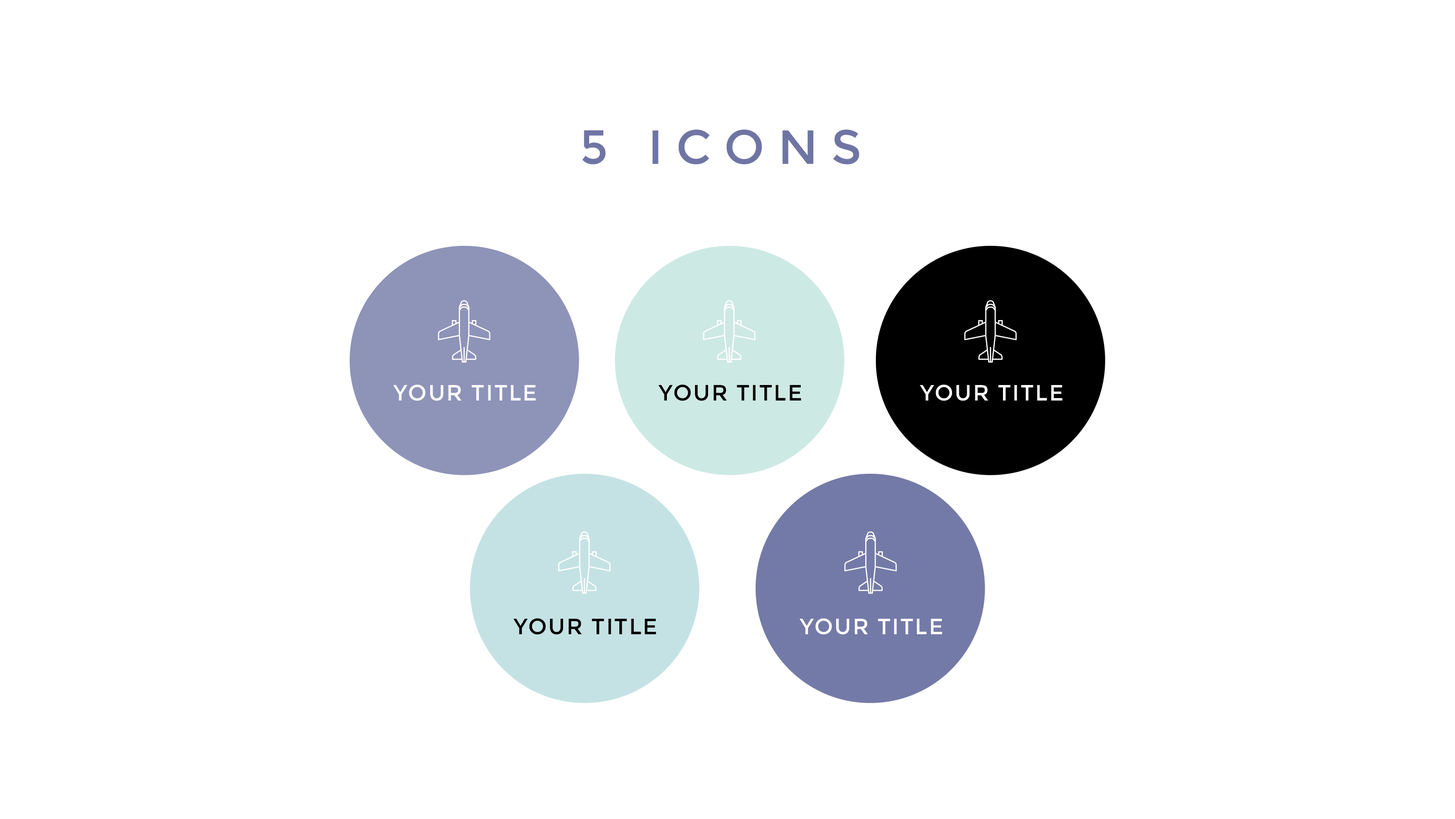
<style>
.page{position:relative;width:1455px;height:819px;background:#ffffff}
.page>*{position:absolute;margin:0}
.t1{font:47.9px "Montserrat-Regular";letter-spacing:0.28em;color:#6f75a3}
.t2{font:22.2px "Montserrat-Regular";letter-spacing:0.056em;color:#ffffff}
.t3{font:22.2px "Montserrat-Regular";letter-spacing:0.056em;color:#000000}
</style>
<div class="page">
<p class="t1" style="left:583px;top:130px;width:277px;height:34px">5 ICONS</p>
<p class="t2" style="left:393px;top:385px;width:143px;height:16px">YOUR TITLE</p>
<p class="t3" style="left:658px;top:385px;width:143px;height:16px">YOUR TITLE</p>
<p class="t2" style="left:920px;top:385px;width:143px;height:16px">YOUR TITLE</p>
<p class="t3" style="left:513px;top:619px;width:143px;height:16px">YOUR TITLE</p>
<p class="t2" style="left:799px;top:619px;width:144px;height:16px">YOUR TITLE</p>
</div>
